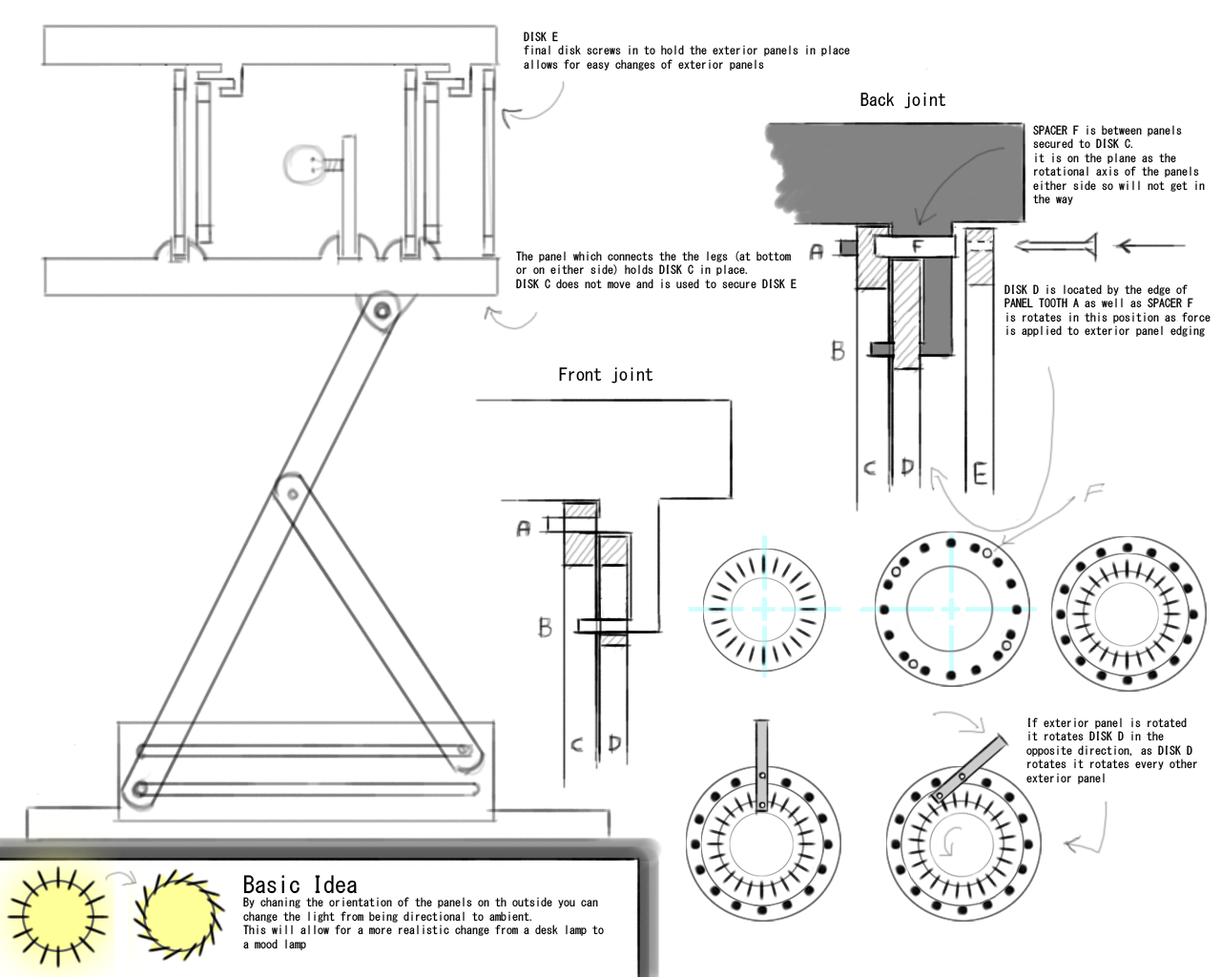
<style>
.page{position:relative;width:1221px;height:977px;background:#ffffff}
.page>*{position:absolute;margin:0}
.t1{font:11.4px "MS-Gothic";color:#000000}
.t2{font:17.2px "MS-Gothic";color:#000000}
.t3{font:22.9px "MS-Gothic";color:#000000}
</style>
<div class="page">
<p class="t1" style="left:524px;top:31px;width:326px;height:40px">DISK E<br>final disk screws in to hold the exterior panels in place<br>allows for easy changes of exterior panels</p>
<p class="t2" style="left:860px;top:93px;width:86px;height:16px">Back joint</p>
<p class="t1" style="left:1033px;top:125px;width:172px;height:80px">SPACER F is between panels<br>secured to DISK C.<br>it is on the plane as the<br>rotational axis of the panels<br>either side so will not get in<br>the way</p>
<p class="t1" style="left:516px;top:251px;width:280px;height:38px">The panel which connects the the legs (at bottom<br>or on either side) holds DISK C in place.<br>DISK C does not move and is used to secure DISK E</p>
<p class="t1" style="left:1004px;top:284px;width:206px;height:53px">DISK D is located by the edge of<br>PANEL TOOTH A as well as SPACER F<br>is rotates in this position as force<br>is applied to exterior panel edging</p>
<p class="t2" style="left:559px;top:367px;width:94px;height:16px">Front joint</p>
<p class="t1" style="left:1026px;top:717px;width:171px;height:67px">If exterior panel is rotated<br>it rotates DISK D in the<br>opposite direction, as DISK D<br>rotates it rotates every other<br>exterior panel</p>
<p class="t1" style="left:243px;top:875px;width:361px;height:75px"><span class="t3">Basic Idea<br></span>By chaning the orientation of the panels on th outside you can<br>change the light from being directional to ambient.<br>This will allow for a more realistic change from a desk lamp to<br>a mood lamp</p>
</div>
